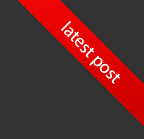
<style>
.page{position:relative;width:144px;height:139px;background:#333333}
.page>*{position:absolute;margin:0}
.t1{font:18px "MyriadPro-Regular";color:#ffffff}
</style>
<div class="page">
<p class="t1" style="left:60px;top:20px;width:60px;height:64px;rotate:45deg">latest post</p>
</div>
